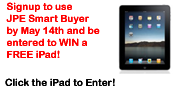
<style>
.page{position:relative;width:181px;height:89px;background:#ffffff}
.page>*{position:absolute;margin:0}
.t1{font:10px "ArialRoundedMTBold";color:#ff0000}
.t2{font:10px "ArialRoundedMTBold";color:#020202}
</style>
<div class="page">
<p class="t1" style="left:6px;top:2px;width:94px;height:56px">Signup to use<br>JPE Smart Buyer<br>by May 14th and be<br>entered to WIN a<br>FREE iPad!</p>
<p class="t2" style="left:5px;top:78px;width:110px;height:8px">Click the iPad to Enter!</p>
</div>
